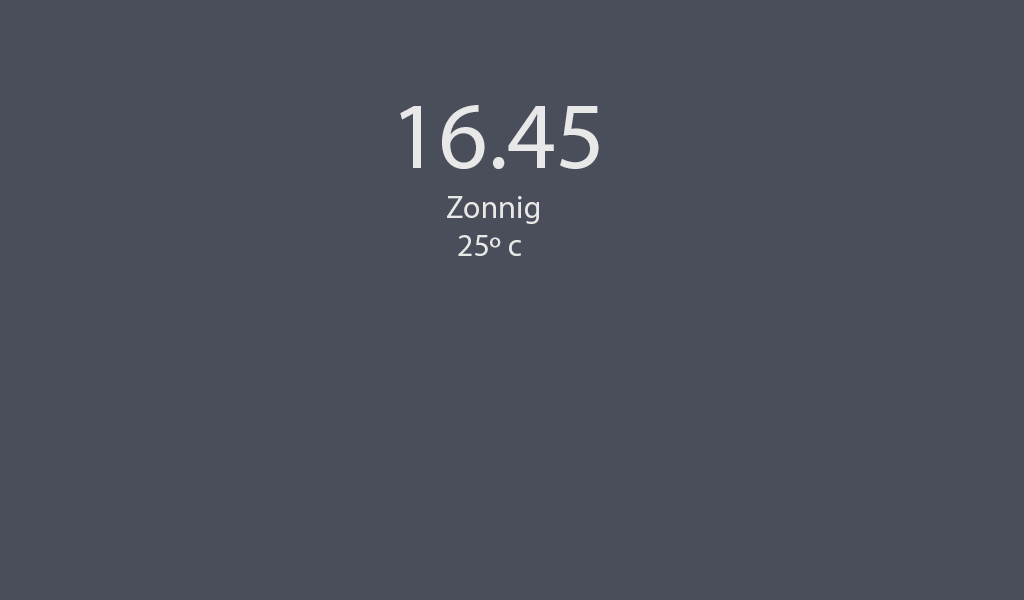
<style>
.page{position:relative;width:1024px;height:600px;background:#494e5a}
.page>*{position:absolute;margin:0}
.t1{font:95.2px "MyriadPro-Regular";color:#e8e8e8}
.t2{font:31.8px "MyriadPro-Regular";color:#e8e8e8}
</style>
<div class="page">
<p class="t1" style="left:400px;top:105px;width:199px;height:64px">16.45</p>
<p class="t2" style="left:447px;top:196px;width:92px;height:28px">Zonnig</p>
</div>
